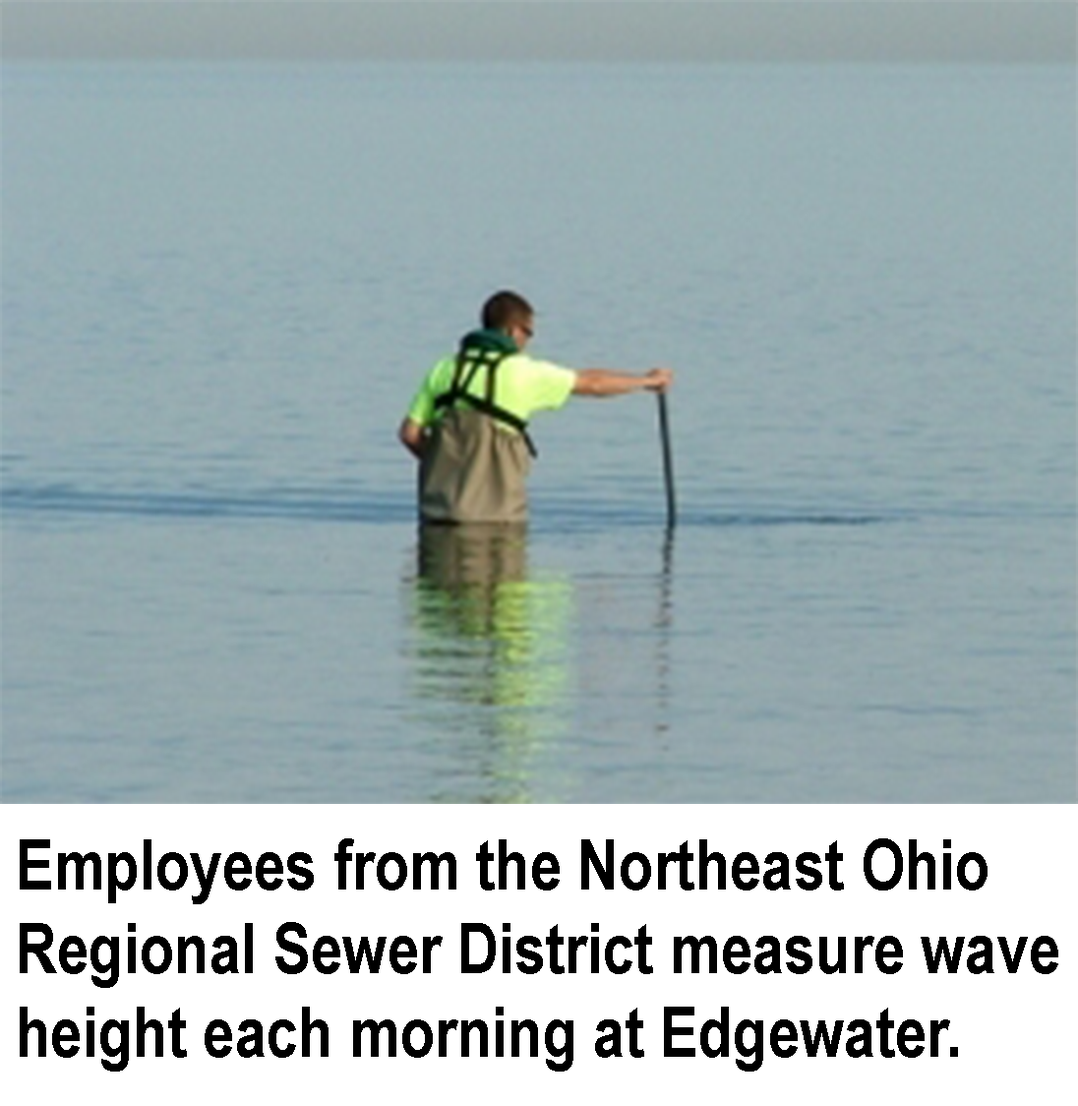
<style>
.page{position:relative;width:1078px;height:1106px}
.page>*{position:absolute;margin:0}
.t1{font:69.7px "ArialNarrow-Bold";color:#000000}
</style>
<div class="page">
<p class="t1" style="left:20px;top:838px;width:1039px;height:233px">Employees from the Northeast Ohio<br>Regional Sewer District measure wave<br>height each morning at Edgewater.</p>
</div>
